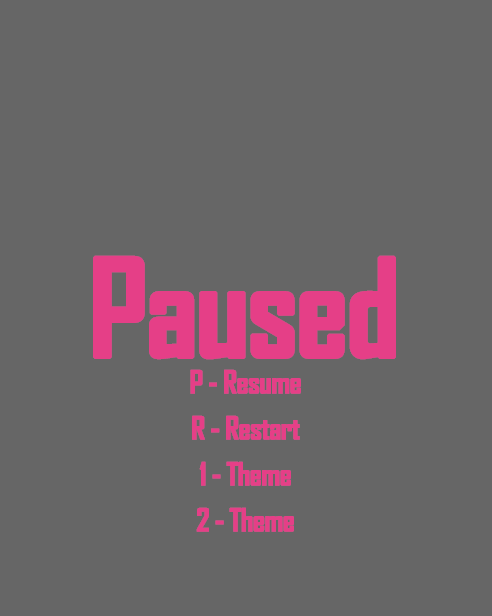
<style>
.page{position:relative;width:492px;height:616px;background:#666666}
.page>*{position:absolute;margin:0}
.t1{font:130px "AgencyFB-Bold";letter-spacing:-0.04em;color:#e53f87;font-weight:bold}
.t2{font:30px/46px "AgencyFB-Bold";letter-spacing:-0.04em;color:#e53f87;font-weight:bold}
</style>
<div class="page">
<p class="t1" style="left:93px;top:255px;width:303px;height:105px">Paused</p>
<p class="t2" style="left:190px;top:369px;width:111px;height:163px;text-align:center">P - Resume<br>R - Restart<br>1 - Theme<br>2 - Theme</p>
</div>
